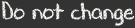
<style>
.page{position:relative;width:135px;height:28px;background:#333333}
.page>*{position:absolute;margin:0}
.t1{font:24px "DJBChalkItUp";letter-spacing:-0.01em}
</style>
<div class="page">
<p class="t1" style="left:1px;top:1px;width:134px;height:25px">Do not change</p>
</div>
